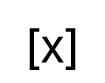
<style>
.page{position:relative;width:105px;height:83px;background:#ffffff}
.page>*{position:absolute;margin:0}
.t1{font:47.9px "DroidSans";color:#000000}
</style>
<div class="page">
<p class="t1" style="left:29px;top:28px;width:47px;height:42px">[x]</p>
</div>
